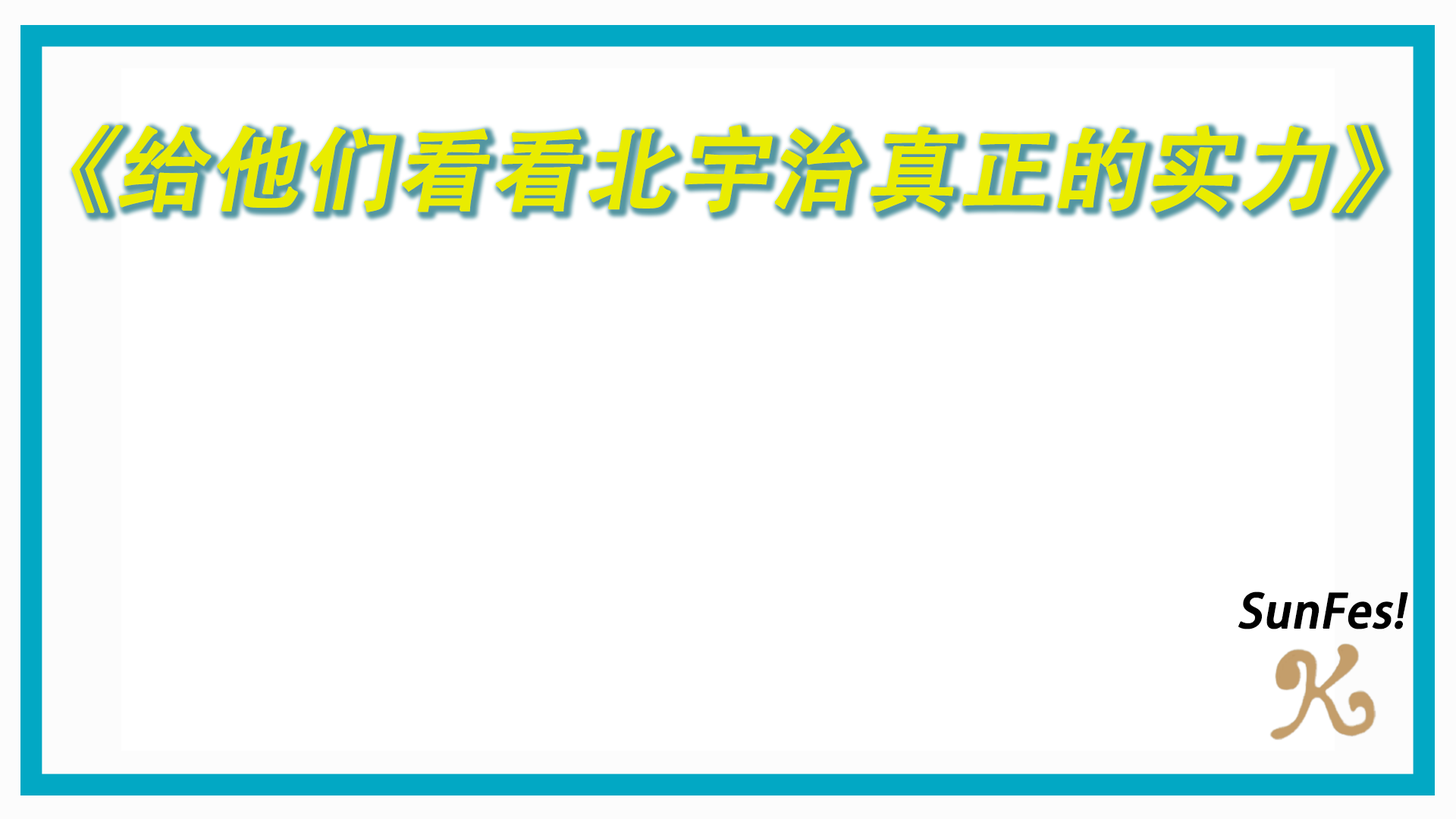
<style>
.page{position:relative;width:1456px;height:819px;background:#ffffff}
.page>*{position:absolute;margin:0}
.t1{font:91px "AdobeHeitiStd-Regular";color:#e9ec00;font-weight:bold;font-style:italic}
.t2{font:45.5px "AdobeHeitiStd-Regular";color:#000000;font-weight:bold;font-style:italic}
</style>
<div class="page">
<p class="t1" style="left:71px;top:124px;width:1313px;height:89px">《给他们看看北宇治真正的实力》</p>
<p class="t2" style="left:1238px;top:591px;width:170px;height:38px">SunFes!</p>
</div>
